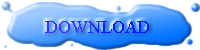
<style>
.page{position:relative;width:200px;height:50px;background:#ffffff}
.page>*{position:absolute;margin:0}
.t1{font:18px "TimesNewRomanPSMT"}
</style>
<div class="page">
<p class="t1" style="left:45px;top:21px;width:104px;height:12px">DOWNLOAD</p>
</div>
